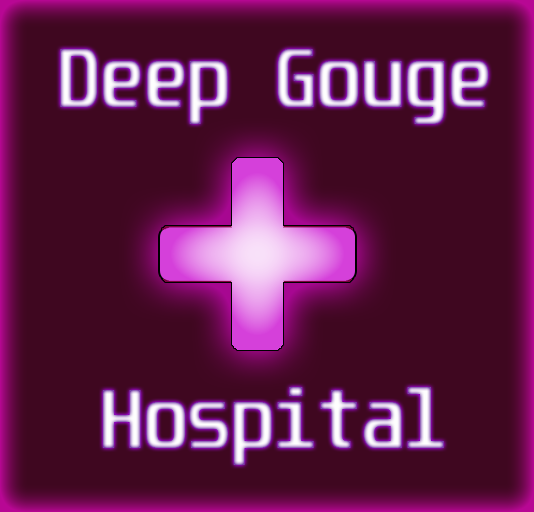
<style>
.page{position:relative;width:534px;height:512px;background:#3f0720}
.page>*{position:absolute;margin:0}
.t1{font:71px "Unispace-Bold"}
</style>
<div class="page">
<p class="t1" style="left:60px;top:49px;width:429px;height:416px;text-align:center">Deep Gouge<br><br><br><br>Hospital</p>
</div>
